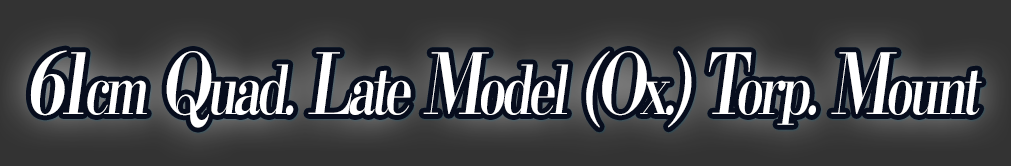
<style>
.page{position:relative;width:1011px;height:166px;background:#333333}
.page>*{position:absolute;margin:0}
.t1{font:67.2px "KochoStd-Heavy";letter-spacing:-0.08em;color:#ffffff;font-style:italic;scale:0.75 1}
.t2{font:84px "KochoStd-Heavy";letter-spacing:-0.08em;color:#ffffff;font-style:italic;scale:0.75 1}
</style>
<div class="page">
<p class="t1" style="left:30px;top:50px;width:952px;height:78px"><span class="t2">61</span>cm<span class="t2"> Q</span>uad.<span class="t2"> L</span>ate<span class="t2"> M</span>odel<span class="t2"> (O</span>x.<span class="t2">) T</span>orp.<span class="t2"> M</span>ount</p>
</div>
